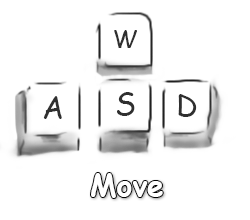
<style>
.page{position:relative;width:250px;height:220px;background:#ffffff}
.page>*{position:absolute;margin:0}
.t1{font:24px "ComicSansMS";color:#2f2f2f}
.t2{font:30px "ComicSansMS";color:#2f2f2f}
.t3{font:30px "ComicSansMS-Bold";color:#ffffff}
</style>
<div class="page">
<p class="t1" style="left:114px;top:30px;width:23px;height:18px">W</p>
<p class="t2" style="left:43px;top:96px;width:19px;height:23px">A</p>
<p class="t2" style="left:117px;top:92px;width:18px;height:24px">S</p>
<p class="t2" style="left:178px;top:94px;width:19px;height:23px">D</p>
<p class="t3" style="left:91px;top:173px;width:72px;height:25px">Move</p>
</div>
